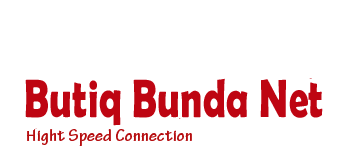
<style>
.page{position:relative;width:341px;height:151px;background:#ffffff}
.page>*{position:absolute;margin:0}
.t1{font:54.4px "BerlinSansFBDemi-Bold";letter-spacing:0.01em;color:#be0512;scale:0.71 1}
</style>
<div class="page">
<p class="t1" style="left:25px;top:78px;width:298px;height:48px">Butiq Bunda Net</p>
</div>
